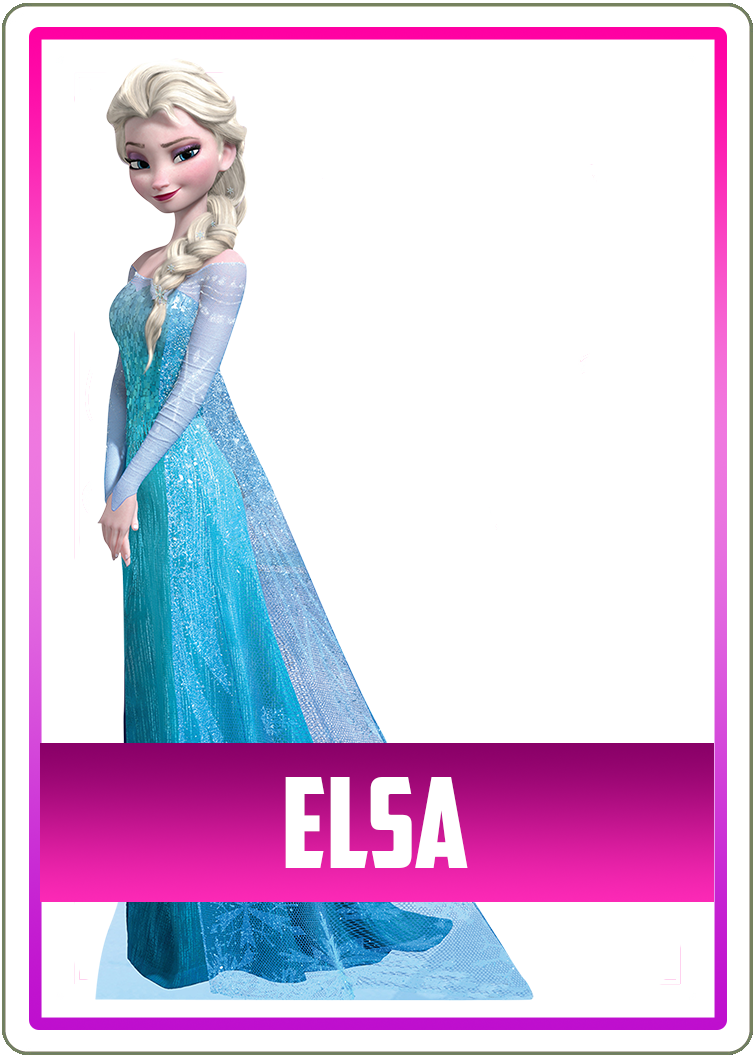
<style>
.page{position:relative;width:755px;height:1057px;background:#ffffff}
.page>*{position:absolute;margin:0}
.t1{font:125px "AmericanCaptain";color:#ffffff}
</style>
<div class="page">
<p class="t1" style="left:285px;top:777px;width:183px;height:91px">ELSA</p>
</div>
